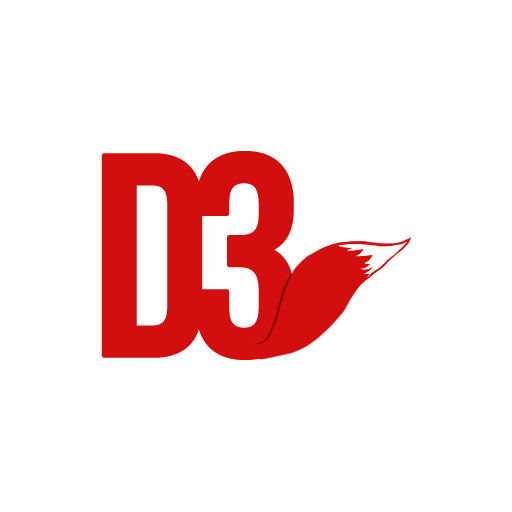
<style>
.page{position:relative;width:512px;height:512px;background:#ffffff}
.page>*{position:absolute;margin:0}
.t1{font:287.2px "BebasNeueBold";letter-spacing:-0.1em;color:#d10f0f;font-weight:bold}
.t2{font:287.2px "BebasNeueBold";letter-spacing:-0.1em;color:#d20e0e;font-weight:bold}
</style>
<div class="page">
<p class="t1" style="left:101px;top:151px;width:193px;height:209px">D<span class="t2">3</span></p>
</div>
